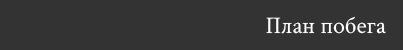
<style>
.page{position:relative;width:403px;height:50px;background:#333333}
.page>*{position:absolute;margin:0}
.t1{font:24px "CrimsonText-Regular";color:#ffffff}
</style>
<div class="page">
<p class="t1" style="left:266px;top:16px;width:120px;height:18px">План побега</p>
</div>
